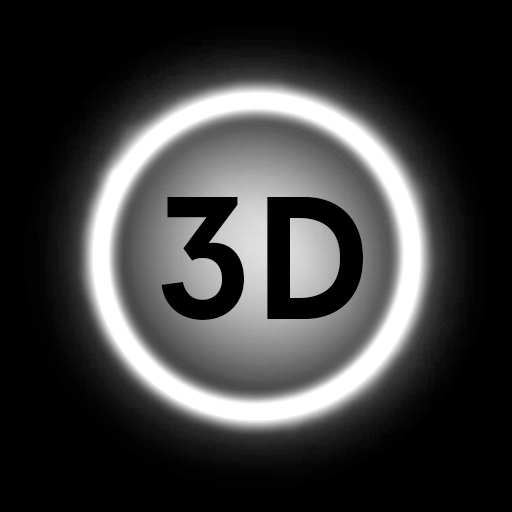
<style>
.page{position:relative;width:512px;height:512px;background:#000000}
.page>*{position:absolute;margin:0}
.t1{font:175px "ApercuMovistarPlus-Bold";color:#000000}
</style>
<div class="page">
<p class="t1" style="left:161px;top:197px;width:202px;height:123px">3D</p>
</div>
